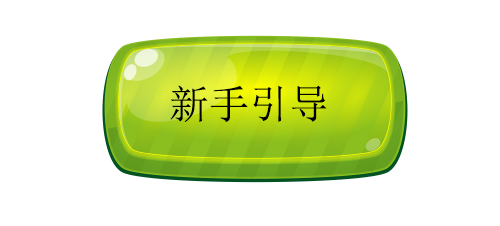
<style>
.page{position:relative;width:500px;height:226px;background:#ffffff}
.page>*{position:absolute;margin:0}
.t1{font:40px "SimSun";color:#000000}
</style>
<div class="page">
<p class="t1" style="left:170px;top:85px;width:157px;height:37px">新手引导</p>
</div>
